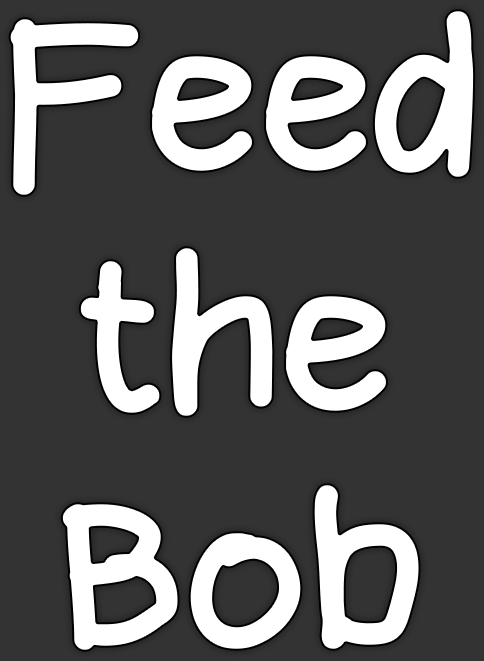
<style>
.page{position:relative;width:484px;height:661px;background:#333333}
.page>*{position:absolute;margin:0}
.t1{font:200px "Bromine";color:#ffffff;font-weight:bold}
</style>
<div class="page">
<p class="t1" style="left:8px;top:9px;width:468px;height:643px;text-align:center">Feed<br>the<br>Bob</p>
</div>
